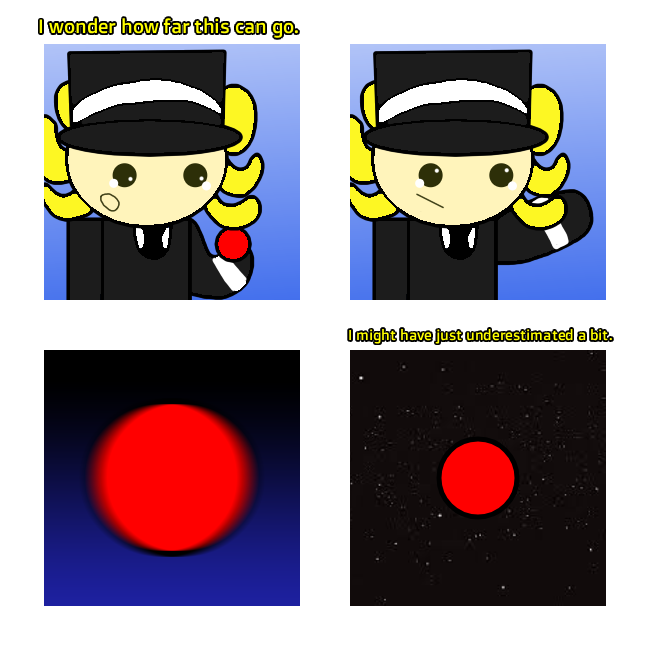
<style>
.page{position:relative;width:650px;height:650px;background:#ffffff}
.page>*{position:absolute;margin:0}
.t1{font:19.3px "DoppioOne-Regular";color:#ffff00}
.t2{font:14.4px "DoppioOne-Regular";color:#ffff00}
</style>
<div class="page">
<p class="t1" style="left:39px;top:18px;width:259px;height:20px">I wonder how far this can go.</p>
<p class="t2" style="left:349px;top:329px;width:263px;height:15px">I might have just underestimated a bit.</p>
</div>
